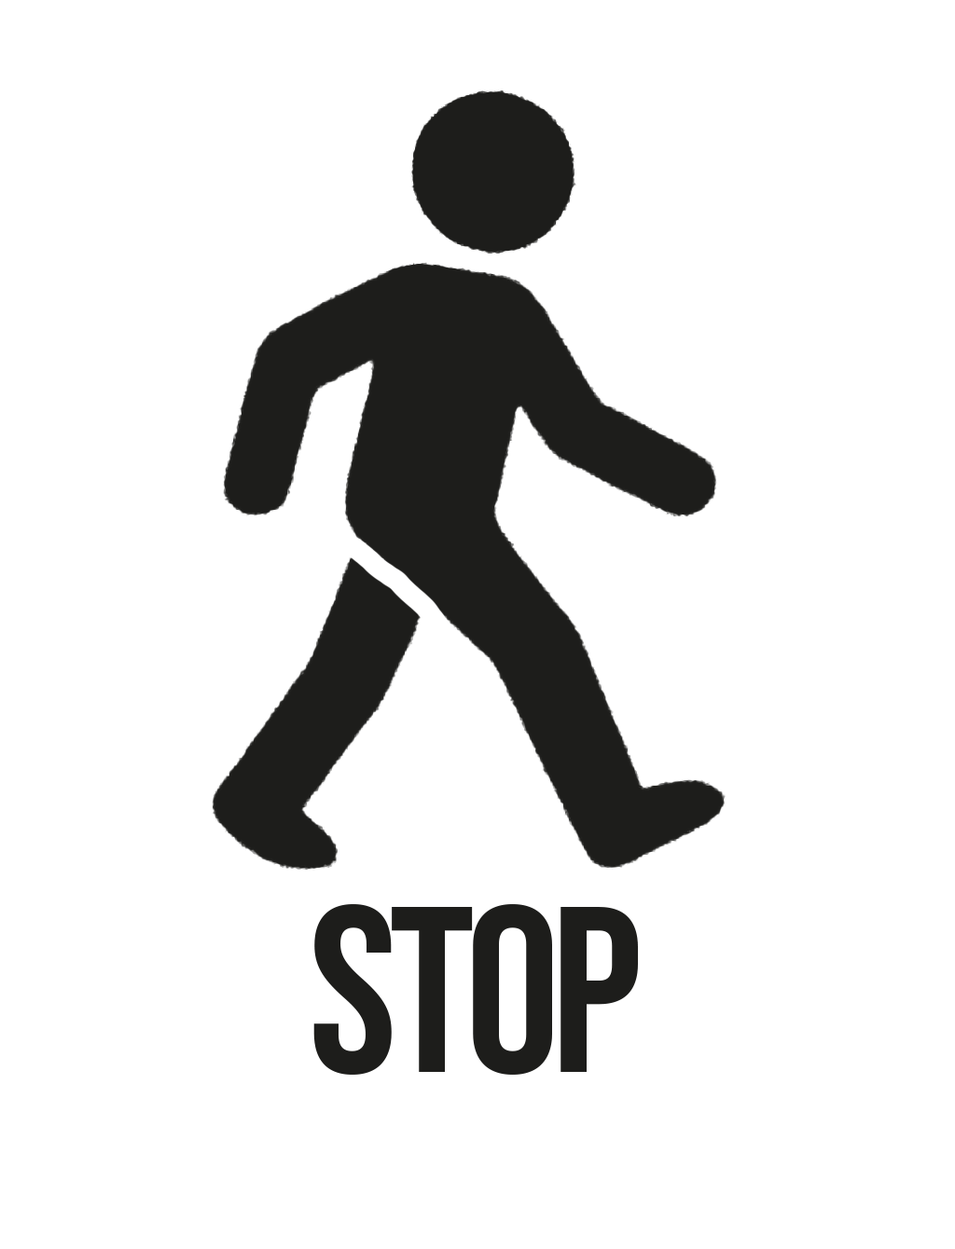
<style>
.page{position:relative;width:955px;height:1249px;background:#ffffff}
.page>*{position:absolute;margin:0}
.t1{font:236.2px "BebasNeue-Regular";letter-spacing:-0.035em;color:#1d1d1b}
</style>
<div class="page">
<p class="t1" style="left:313px;top:904px;width:325px;height:171px">STOP</p>
</div>
